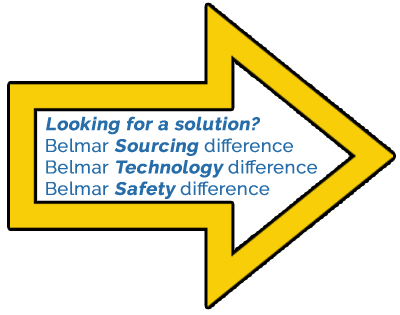
<style>
.page{position:relative;width:400px;height:315px;background:#ffffff}
.page>*{position:absolute;margin:0}
.t1{font:18px "Raleway-Bold";letter-spacing:0.025em;color:#276da9;font-weight:bold;font-style:italic}
.t2{font:18px "Raleway-Regular";letter-spacing:0.025em;color:#276da9;font-weight:bold}
</style>
<div class="page">
<p class="t1" style="left:46px;top:116px;width:271px;height:83px">Looking for a solution?<br><span class="t2">Belmar </span>Sourcing<span class="t2"> difference<br>Belmar </span>Technology<span class="t2"> difference<br>Belmar </span>Safety <span class="t2">difference</span></p>
</div>
